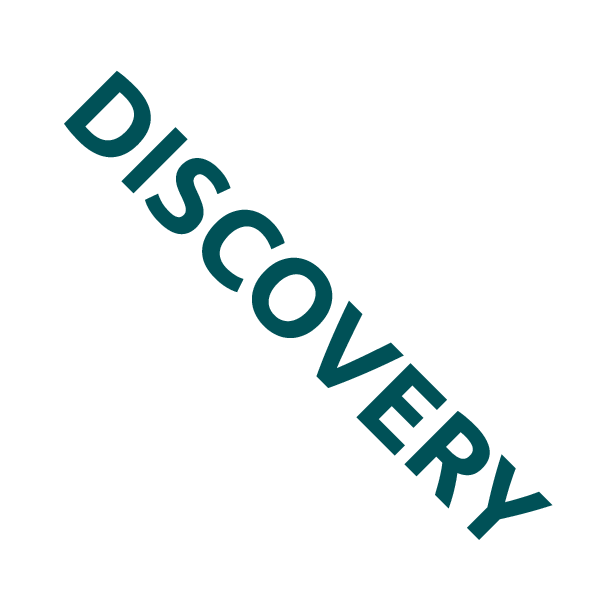
<style>
.page{position:relative;width:616px;height:616px;background:#ffffff}
.page>*{position:absolute;margin:0}
.t1{font:110.7px "Ubuntu-Bold";color:#005157}
</style>
<div class="page">
<p class="t1" style="left:64px;top:70px;width:489px;height:470px;rotate:45deg">DISCOVERY</p>
</div>
